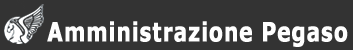
<style>
.page{position:relative;width:353px;height:50px;background:#333333}
.page>*{position:absolute;margin:0}
.t1{font:26px "Verdana-Bold";letter-spacing:0.025em;color:#ffffff;font-weight:bold;scale:0.77 1}
</style>
<div class="page">
<p class="t1" style="left:47px;top:21px;width:301px;height:26px">Amministrazione Pegaso</p>
</div>
